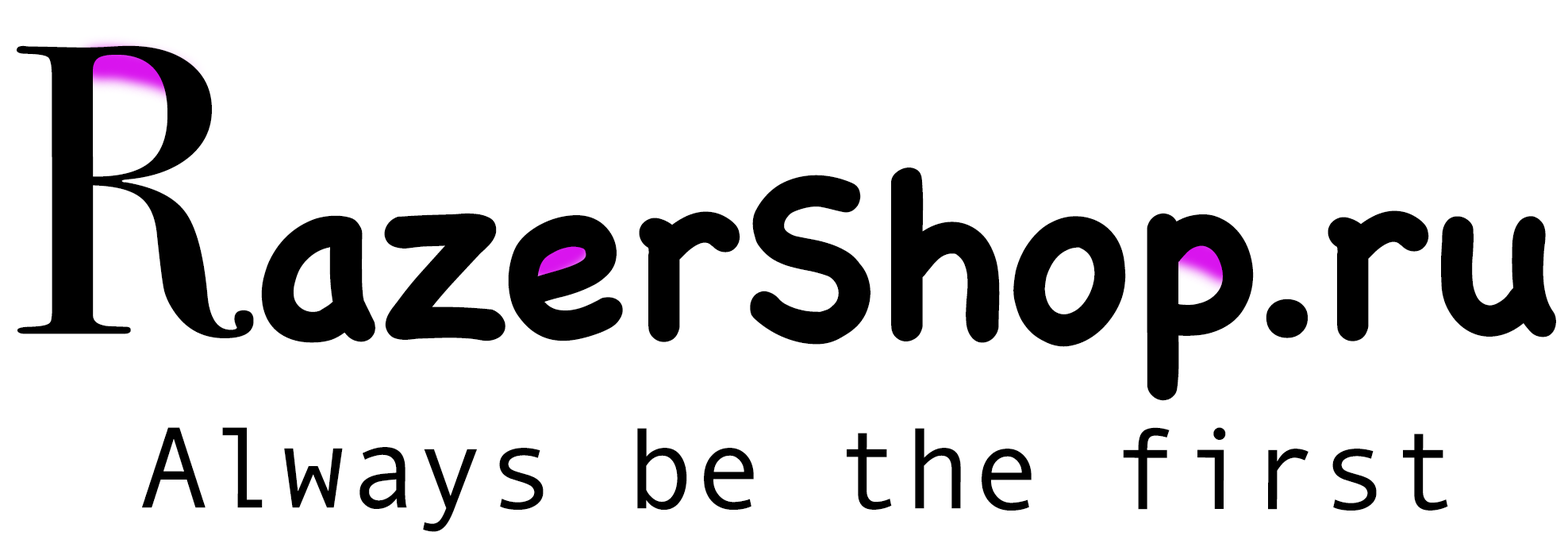
<style>
.page{position:relative;width:1568px;height:555px;background:#ffffff}
.page>*{position:absolute;margin:0}
.t1{font:231.4px "ChalkboardSE-Bold";color:#000000}
.t2{font:413.3px "BodoniSvtyTwoSCITCTT-Book";color:#000000}
.t3{font:115.7px "AndaleMono";color:#000000}
</style>
<div class="page">
<p class="t1" style="left:17px;top:45px;width:1539px;height:356px"><span class="t2">R</span>azerShop.ru</p>
<p class="t3" style="left:142px;top:427px;width:1306px;height:105px">Always be the first</p>
</div>
